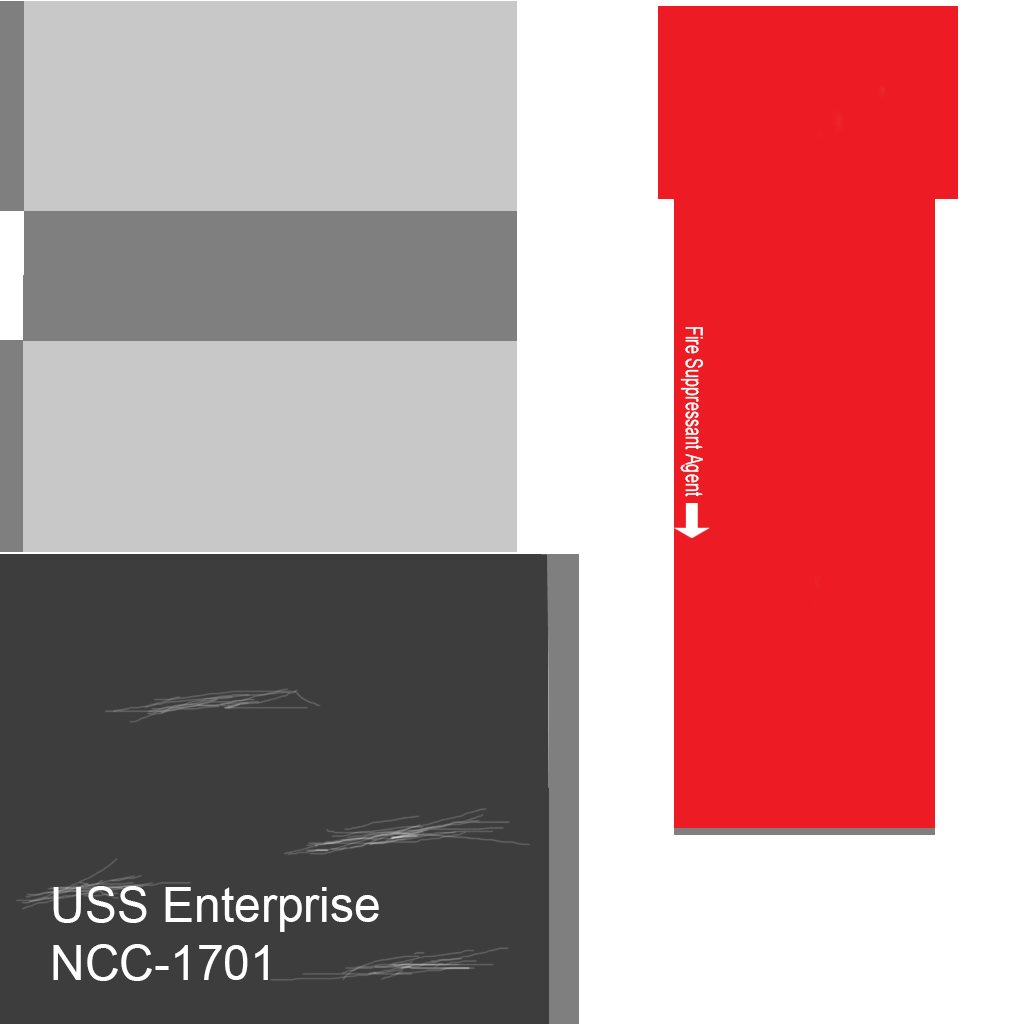
<style>
.page{position:relative;width:1024px;height:1024px;background:#ffffff}
.page>*{position:absolute;margin:0}
.t1{font:23.7px "ArialMT";color:#ffffff;scale:0.69 1}
.t2{font:48px "ArialMT";color:#ffffff}
</style>
<div class="page">
<p class="t1" style="left:680px;top:327px;width:24px;height:170px;rotate:90deg">Fire Suppressant Agent</p>
<p class="t2" style="left:53px;top:886px;width:326px;height:95px">USS Enterprise<br>NCC-1701</p>
</div>
